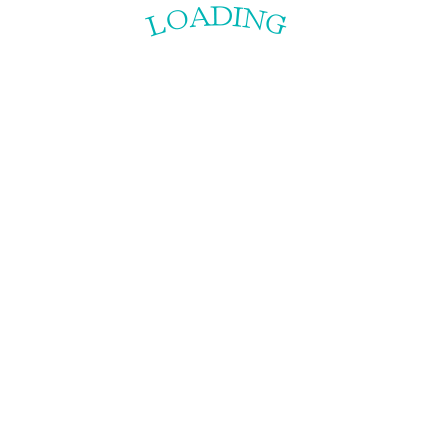
<style>
.page{position:relative;width:432px;height:432px;background:#ffffff}
.page>*{position:absolute;margin:0}
.t1{font:28px "TimesNewRomanPSMT";color:#00b4b4}
</style>
<div class="page">
<p class="t1" style="left:145px;top:6px;width:142px;height:31px">LOADING</p>
</div>
